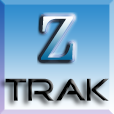
<style>
.page{position:relative;width:114px;height:114px}
.page>*{position:absolute;margin:0}
.t1{font:30px "GoodTimes"}
</style>
<div class="page">
<p class="t1" style="left:5px;top:78px;width:104px;height:23px">TRAK</p>
</div>
